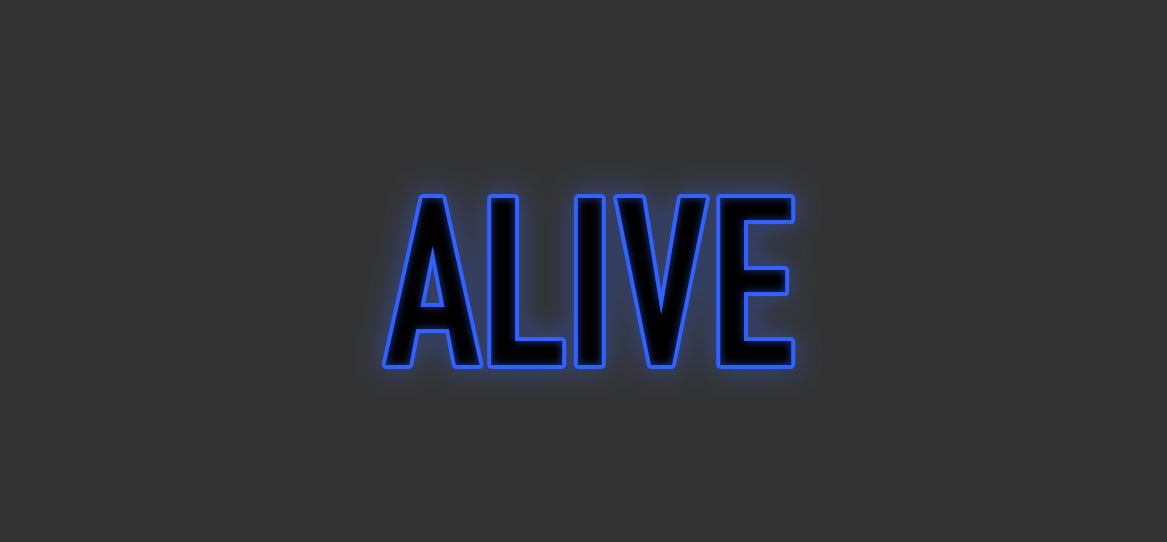
<style>
.page{position:relative;width:1167px;height:542px;background:#333333}
.page>*{position:absolute;margin:0}
.t1{font:233.7px "DINEngschrift";color:#02050c}
</style>
<div class="page">
<p class="t1" style="left:385px;top:198px;width:407px;height:167px">ALIVE</p>
</div>
